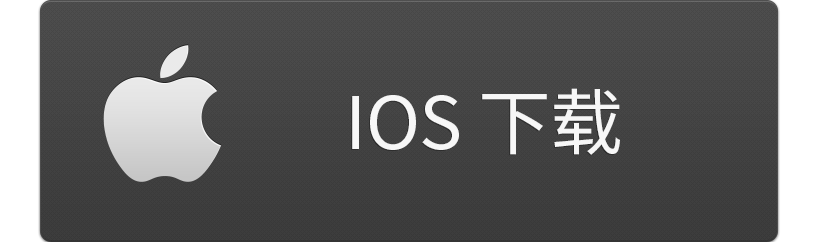
<style>
.page{position:relative;width:817px;height:242px}
.page>*{position:absolute;margin:0}
.t1{font:72px "NotoSansCJKsc-Regular";letter-spacing:-0.01em;color:#ffffff;text-transform:uppercase}
</style>
<div class="page">
<p class="t1" style="left:352px;top:88px;width:268px;height:67px;opacity:0.94">iOS 下载</p>
</div>
